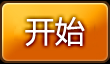
<style>
.page{position:relative;width:110px;height:64px}
.page>*{position:absolute;margin:0}
.t1{font:30px "MicrosoftYaHei";color:#ffffff}
</style>
<div class="page">
<p class="t1" style="left:25px;top:16px;width:60px;height:31px">开始</p>
</div>
